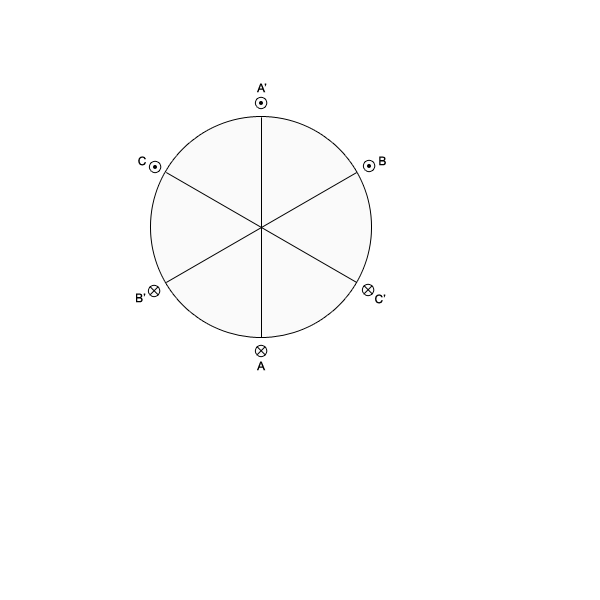
<style>
.page{position:relative;width:600px;height:600px;background:#ffffff}
.page>*{position:absolute;margin:0}
.t1{font:12px "ArialMT";color:#010101}
</style>
<div class="page">
<p class="t1" style="left:257px;top:83px;width:10px;height:10px">A’</p>
<p class="t1" style="left:138px;top:156px;width:8px;height:10px">C</p>
<p class="t1" style="left:379px;top:156px;width:7px;height:10px">B</p>
<p class="t1" style="left:136px;top:293px;width:10px;height:10px">B’</p>
<p class="t1" style="left:375px;top:294px;width:11px;height:10px">C’</p>
<p class="t1" style="left:257px;top:361px;width:9px;height:10px">A</p>
</div>
